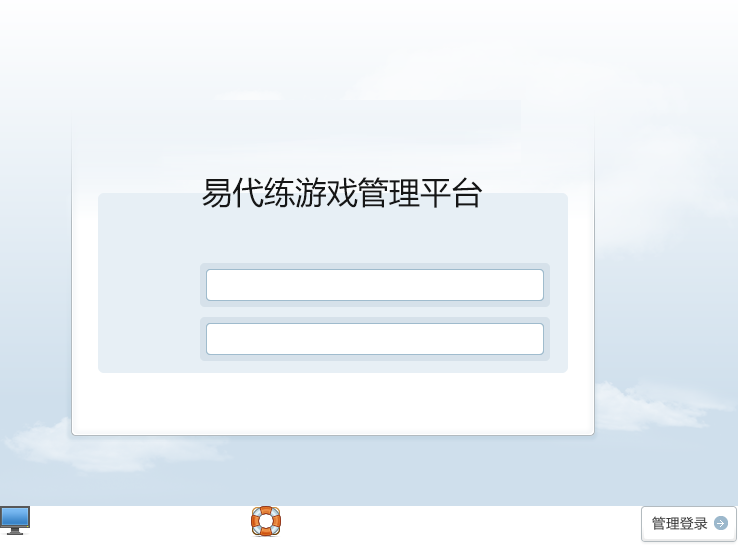
<style>
.page{position:relative;width:738px;height:550px;background:#ffffff}
.page>*{position:absolute;margin:0}
.t1{font:31.2px "MicrosoftYaHei";color:#161616}
</style>
<div class="page">
<p class="t1" style="left:202px;top:177px;width:281px;height:31px">易代练游戏管理平台</p>
</div>
